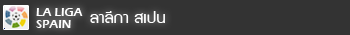
<style>
.page{position:relative;width:350px;height:35px;background:#333333}
.page>*{position:absolute;margin:0}
.t1{font:12px/12px "ErasITC-Demi";color:#ffffff}
.t2{font:17.2px "supermarket";color:#ffffff;scale:1.09 1}
</style>
<div class="page">
<p class="t1" style="left:36px;top:8px;width:47px;height:20px">LA LIGA <br>SPAIN</p>
<p class="t2" style="left:90px;top:11px;width:75px;height:12px">ลาลีกา สเปน</p>
</div>
